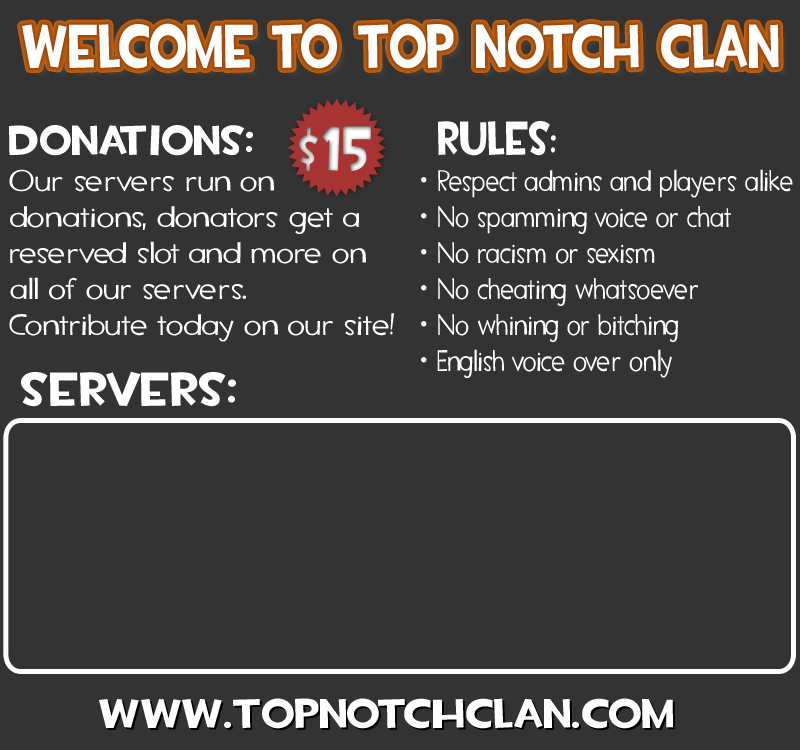
<style>
.page{position:relative;width:800px;height:750px;background:#333333}
.page>*{position:absolute;margin:0}
.t1{font:62px "TF2Build";color:#ffffff;scale:0.79 1}
.t2{font:30px "TF2Secondary";color:#ffffff}
.t3{font:42px "TF2Build";color:#ffffff}
.t4{font:66.6px "TF2Build";scale:0.85 1}
.t5{font:30px "TF2Secondary";color:#ffffff;scale:0.79 1}
.t6{font:48px "TF2Build";color:#ffffff;scale:0.79 1}
.t7{font:36px "TF2Build";color:#ffffff;scale:0.79 1}
.t8{font:36px "TF2Secondary";color:#ffffff;font-weight:bold}
.t9{font:48px "TF2Build";color:#ffffff}
.t10{font:41.6px "TF2Build";color:#ffffff;scale:1.04 1}
</style>
<div class="page">
<p class="t1" style="left:22px;top:23px;width:757px;height:46px">Welcome to Top Notch Clan</p>
<p class="t2" style="left:9px;top:125px;width:385px;height:217px"><span class="t3">Donations:<br></span>Our servers run on <br>donations, donators get a reserved slot and more on all of our servers.<br>Contribute today on our site!</p>
<p class="t4" style="left:299px;top:126px;width:72px;height:46px">$15</p>
<p class="t5" style="left:437px;top:121px;width:356px;height:257px"><span class="t6">rules</span><span class="t7">:<br></span>Respect admins and players alike<br>No spamming voice or chat<br>No racism or sexism<br>No cheating whatsoever<br>No whining or bitching<br>English voice over only</p>
<p class="t8" style="left:421px;top:177px;width:6px;height:186px;text-align:center">......</p>
<p class="t9" style="left:21px;top:371px;width:215px;height:36px">Servers:</p>
<p class="t10" style="left:99px;top:698px;width:574px;height:31px">www.Topnotchclan.com</p>
</div>
